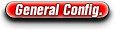
<style>
.page{position:relative;width:140px;height:30px;background:#ffffff}
.page>*{position:absolute;margin:0}
.t1{font:14px "ARubricaCnBoldItalic";color:#ffffff}
</style>
<div class="page">
<p class="t1" style="left:15px;top:4px;width:87px;height:13px">General Config.</p>
</div>
